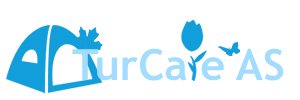
<style>
.page{position:relative;width:300px;height:100px;background:#ffffff}
.page>*{position:absolute;margin:0}
.t1{font:43px "TrebuchetMS-Bold";color:#a2ddff}
</style>
<div class="page">
<p class="t1" style="left:72px;top:48px;width:212px;height:33px">TurCa e AS</p>
</div>
